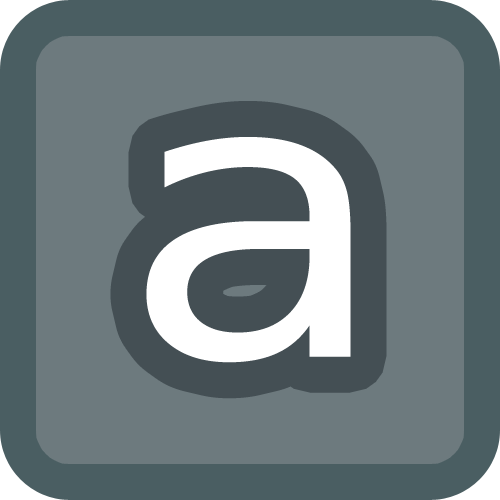
<style>
.page{position:relative;width:500px;height:500px;background:#6d7a7e}
.page>*{position:absolute;margin:0}
.t1{font:392px "Menlo-Regular";color:#ffffff;scale:1.15 1}
</style>
<div class="page">
<p class="t1" style="left:146px;top:137px;width:205px;height:226px">a</p>
</div>
